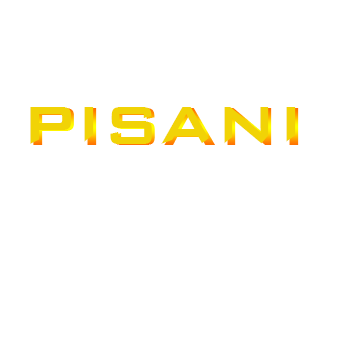
<style>
.page{position:relative;width:350px;height:350px;background:#ffffff}
.page>*{position:absolute;margin:0}
.t1{font:72px "BankGothicBT-Medium";color:#f1d306}
</style>
<div class="page">
<p class="t1" style="left:30px;top:107px;width:266px;height:37px">PISANI</p>
</div>
